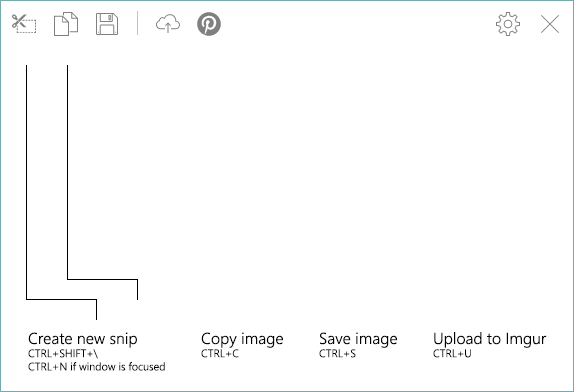
<style>
.page{position:relative;width:574px;height:392px;background:#ffffff}
.page>*{position:absolute;margin:0}
.t1{font:11px "SegoeUI-Semilight";color:#010101}
.t2{font:16px "SegoeUI-Semilight";color:#010101}
</style>
<div class="page">
<p class="t1" style="left:28px;top:332px;width:137px;height:39px"><span class="t2">Create new snip<br></span>CTRL+SHIFT+\ <br>CTRL+N if window is focused</p>
<p class="t2" style="left:201px;top:332px;width:82px;height:26px">Copy image<br><span class="t1">CTRL+C</span></p>
<p class="t2" style="left:319px;top:332px;width:78px;height:26px">Save image<br><span class="t1">CTRL+S</span></p>
<p class="t2" style="left:433px;top:332px;width:114px;height:26px">Upload to Imgur<br><span class="t1">CTRL+U</span></p>
</div>
